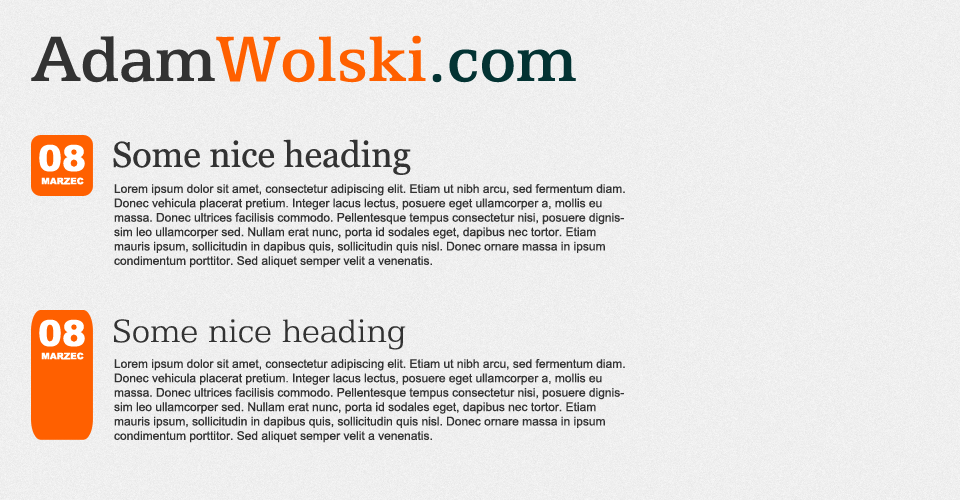
<style>
.page{position:relative;width:960px;height:500px}
.page>*{position:absolute;margin:0}
.t1{font:72px "Egyptian505BT-Medium";color:#ff6000}
.t2{font:72px "Egyptian505BT-Medium";color:#333333}
.t3{font:72px "Egyptian505BT-Medium";color:#033333}
.t4{font:36px "Arial-Black";color:#ffffff}
.t5{font:36px "Georgia";color:#333333}
.t6{font:9px "Arial-Black";color:#ffffff}
.t7{font:12px "ArialMT";color:#333333}
.t8{font:36px "Egyptian505BT-Light";color:#333333}
</style>
<div class="page">
<p class="t1" style="left:31px;top:35px;width:545px;height:48px"><span class="t2">Adam</span>Wolski<span class="t3">.com</span></p>
<p class="t4" style="left:39px;top:144px;width:46px;height:28px">08</p>
<p class="t5" style="left:113px;top:139px;width:298px;height:36px">Some nice heading</p>
<p class="t6" style="left:41px;top:177px;width:43px;height:8px">MARZEC</p>
<p class="t7" style="left:114px;top:184px;width:511px;height:84px">Lorem ipsum dolor sit amet, consectetur adipiscing elit. Etiam ut nibh arcu, sed fermentum diam. Donec vehicula placerat pretium. Integer lacus lectus, posuere eget ullamcorper a, mollis eu massa. Donec ultrices facilisis commodo. Pellentesque tempus consectetur nisi, posuere dignissim leo ullamcorper sed. Nullam erat nunc, porta id sodales eget, dapibus nec tortor. Etiam mauris ipsum, sollicitudin in dapibus quis, sollicitudin quis nisl. Donec ornare massa in ipsum condimentum porttitor. Sed aliquet semper velit a venenatis.</p>
<p class="t4" style="left:39px;top:319px;width:46px;height:28px">08</p>
<p class="t8" style="left:114px;top:319px;width:292px;height:31px">Some nice heading</p>
<p class="t6" style="left:41px;top:352px;width:43px;height:8px">MARZEC</p>
<p class="t7" style="left:114px;top:359px;width:511px;height:84px">Lorem ipsum dolor sit amet, consectetur adipiscing elit. Etiam ut nibh arcu, sed fermentum diam. Donec vehicula placerat pretium. Integer lacus lectus, posuere eget ullamcorper a, mollis eu massa. Donec ultrices facilisis commodo. Pellentesque tempus consectetur nisi, posuere dignissim leo ullamcorper sed. Nullam erat nunc, porta id sodales eget, dapibus nec tortor. Etiam mauris ipsum, sollicitudin in dapibus quis, sollicitudin quis nisl. Donec ornare massa in ipsum condimentum porttitor. Sed aliquet semper velit a venenatis.</p>
</div>
